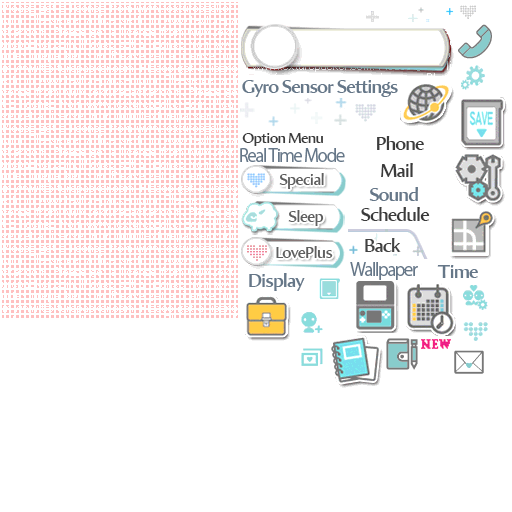
<style>
.page{position:relative;width:512px;height:512px;background:#ffffff}
.page>*{position:absolute;margin:0}
.t1{font:18.7px "AmiraParadiso";letter-spacing:-0.04em;color:#667788}
.t2{font:14.7px "AmiraParadiso";letter-spacing:-0.04em;color:#333333}
.t3{font:18.7px "AmiraParadiso";letter-spacing:-0.04em;color:#333333}
.t4{font:17.3px "KozGoPr6N-Regular";letter-spacing:-0.08em;color:#667788}
.t5{font:16px "AmiraParadiso";letter-spacing:-0.04em;color:#555555}
</style>
<div class="page">
<p class="t1" style="left:242px;top:80px;width:156px;height:17px">Gyro Sensor Settings</p>
<p class="t2" style="left:242px;top:133px;width:81px;height:13px;opacity:0.96">Option Menu</p>
<p class="t3" style="left:377px;top:136px;width:47px;height:14px;opacity:0.96">Phone</p>
<p class="t4" style="left:240px;top:148px;width:105px;height:14px">Real Time Mode</p>
<p class="t5" style="left:279px;top:173px;width:45px;height:16px;opacity:0.96">Special</p>
<p class="t3" style="left:381px;top:163px;width:32px;height:14px;opacity:0.96">Mail</p>
<p class="t1" style="left:369px;top:187px;width:49px;height:14px">Sound</p>
<p class="t3" style="left:361px;top:207px;width:69px;height:14px;opacity:0.96">Schedule</p>
<p class="t5" style="left:288px;top:210px;width:36px;height:16px;opacity:0.96">Sleep</p>
<p class="t5" style="left:276px;top:246px;width:57px;height:12px;opacity:0.96">LovePlus</p>
<p class="t3" style="left:365px;top:238px;width:36px;height:14px;opacity:0.96">Back</p>
<p class="t4" style="left:350px;top:262px;width:68px;height:18px">Wallpaper</p>
<p class="t1" style="left:437px;top:265px;width:41px;height:13px">Time</p>
<p class="t1" style="left:249px;top:273px;width:56px;height:18px">Display</p>
</div>
